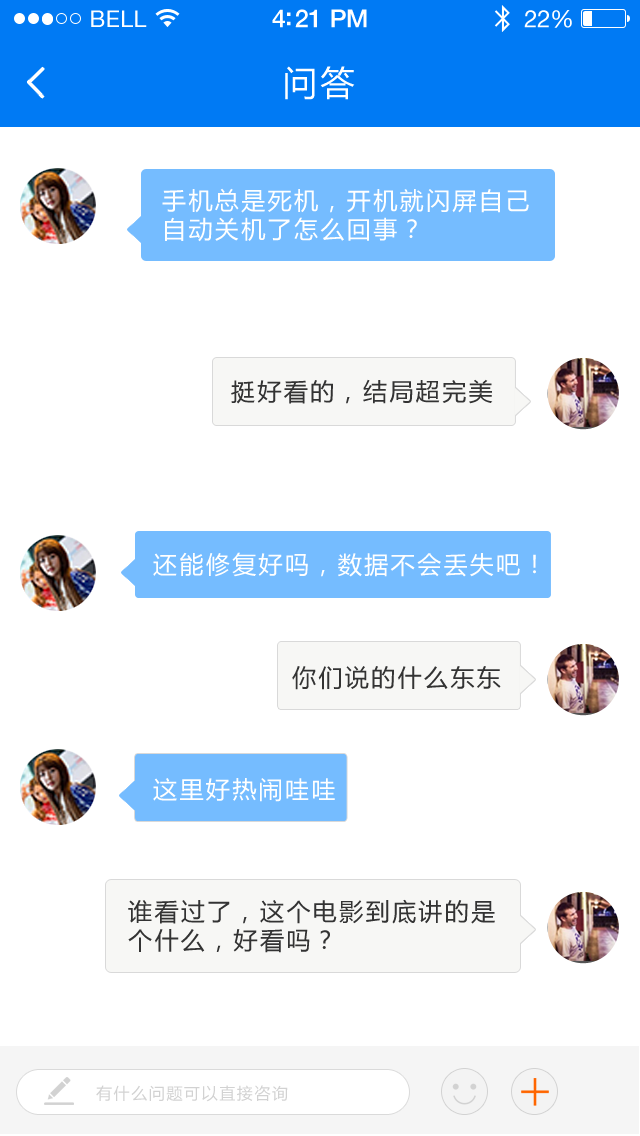
<style>
.page{position:relative;width:640px;height:1136px;background:#ffffff}
.page>*{position:absolute;margin:0}
.t1{font:23px "HelveticaNeue";letter-spacing:0.02em;color:#ffffff}
.t2{font:25px "HelveticaNeue-Medium";letter-spacing:-0.02em;color:#ffffff}
.t3{font:24px "HelveticaNeue";letter-spacing:-0.02em;color:#ffffff}
.t4{font:34px "MicrosoftYaHei";letter-spacing:0.1em;color:#ffffff}
.t5{font:24px "MicrosoftYaHei";letter-spacing:0.1em;color:#ffffff}
.t6{font:24px "MicrosoftYaHei";letter-spacing:0.1em;color:#333333}
.t7{font:16px "MicrosoftYaHei";letter-spacing:0.1em;color:#d2d2d2}
</style>
<div class="page">
<p class="t1" style="left:91px;top:10px;width:56px;height:17px">BELL</p>
<p class="t2" style="left:272px;top:9px;width:95px;height:19px">4:21 PM</p>
<p class="t3" style="left:524px;top:10px;width:48px;height:18px">22%</p>
<p class="t4" style="left:285px;top:66px;width:70px;height:34px">问答</p>
<p class="t5" style="left:162px;top:188px;width:367px;height:54px">手机总是死机，开机就闪屏自己<br>自动关机了怎么回事？</p>
<p class="t6" style="left:231px;top:379px;width:262px;height:25px">挺好看的，结局超完美</p>
<p class="t5" style="left:153px;top:552px;width:383px;height:25px">还能修复好吗，数据不会丢失吧！</p>
<p class="t6" style="left:292px;top:666px;width:209px;height:24px">你们说的什么东东</p>
<p class="t5" style="left:153px;top:778px;width:182px;height:24px">这里好热闹哇哇</p>
<p class="t6" style="left:128px;top:899px;width:367px;height:54px">谁看过了，这个电影到底讲的是<br>个什么，好看吗？</p>
<p class="t7" style="left:96px;top:1085px;width:192px;height:17px">有什么问题可以直接咨询</p>
</div>
